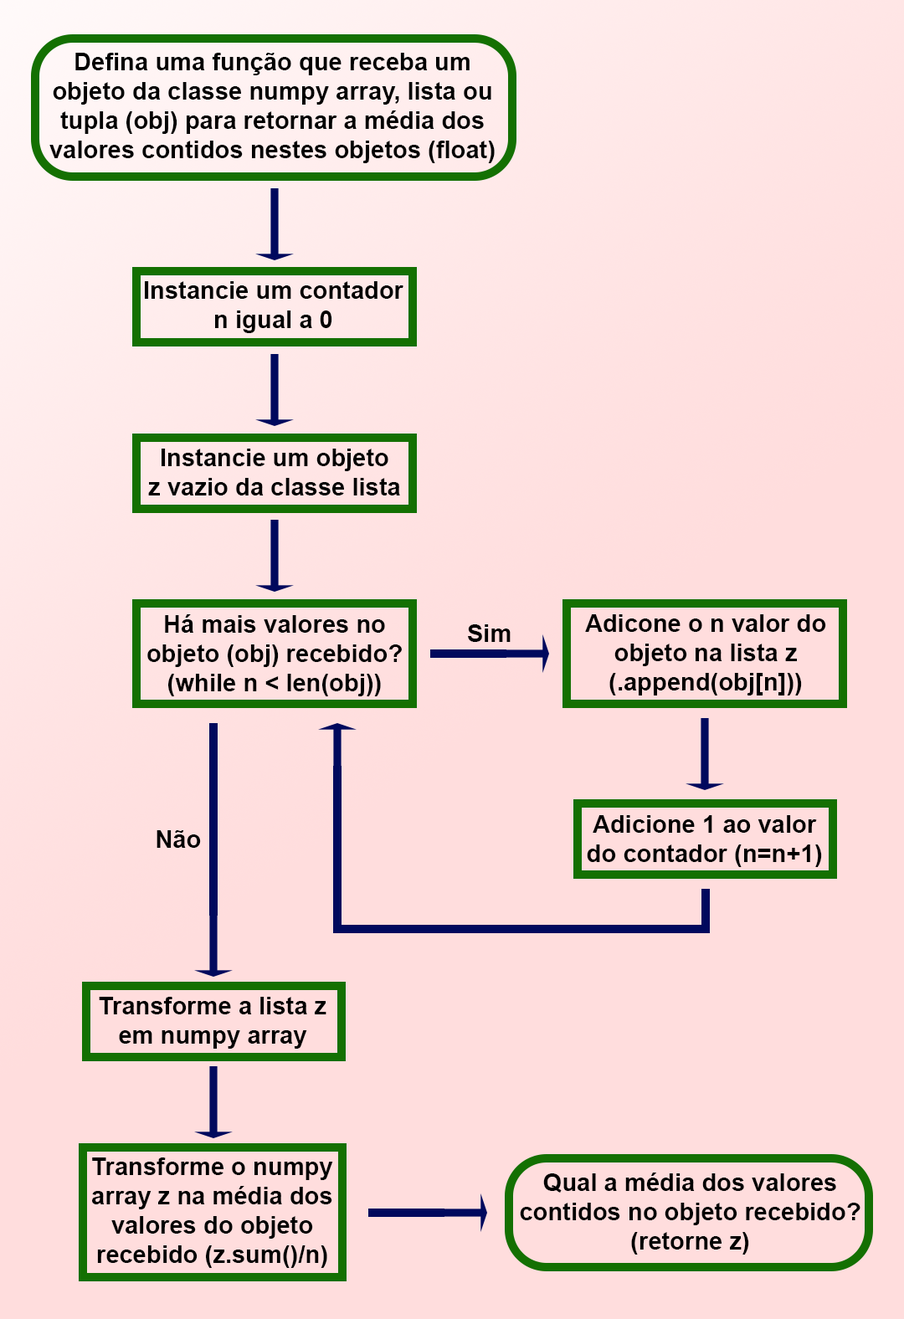
<style>
.page{position:relative;width:904px;height:1319px;background:#ffdddd}
.page>*{position:absolute;margin:0}
.t1{font:24.4px "Arial-BoldMT";color:#000000}
</style>
<div class="page">
<p class="t1" style="left:49px;top:53px;width:446px;height:110px;text-align:center">Defina uma função que receba um<br>objeto da classe numpy array, lista ou<br>tupla (obj) para retornar a média dos<br>valores contidos nestes objetos (float)</p>
<p class="t1" style="left:145px;top:281px;width:258px;height:52px;text-align:center">Instancie um contador<br>n igual a 0</p>
<p class="t1" style="left:148px;top:449px;width:252px;height:47px;text-align:center">Instancie um objeto<br>z vazio da classe lista</p>
<p class="t1" style="left:147px;top:614px;width:255px;height:82px;text-align:center">Há mais valores no<br>objeto (obj) recebido?<br>(while n &lt; len(obj))</p>
<p class="t1" style="left:585px;top:614px;width:241px;height:82px;text-align:center">Adicone o n valor do<br>objeto na lista z<br>(.append(obj[n]))</p>
<p class="t1" style="left:468px;top:624px;width:43px;height:18px">Sim</p>
<p class="t1" style="left:587px;top:815px;width:235px;height:52px;text-align:center">Adicione 1 ao valor<br>do contador (n=n+1)</p>
<p class="t1" style="left:157px;top:830px;width:44px;height:18px">Não</p>
<p class="t1" style="left:99px;top:997px;width:227px;height:52px;text-align:center">Transforme a lista z<br>em numpy array</p>
<p class="t1" style="left:92px;top:1158px;width:241px;height:110px;text-align:center">Transforme o numpy<br>array z na média dos<br>valores do objeto<br>recebido (z.sum()/n)</p>
<p class="t1" style="left:520px;top:1173px;width:340px;height:82px;text-align:center">Qual a média dos valores<br>contidos no objeto recebido?<br>(retorne z)</p>
</div>
